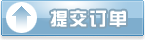
<style>
.page{position:relative;width:145px;height:40px}
.page>*{position:absolute;margin:0}
.t1{font:18px "FZZYJW--GB1-0";letter-spacing:0.1em;color:#ffffff}
</style>
<div class="page">
<p class="t1" style="left:50px;top:10px;width:76px;height:17px">提交订单</p>
</div>
